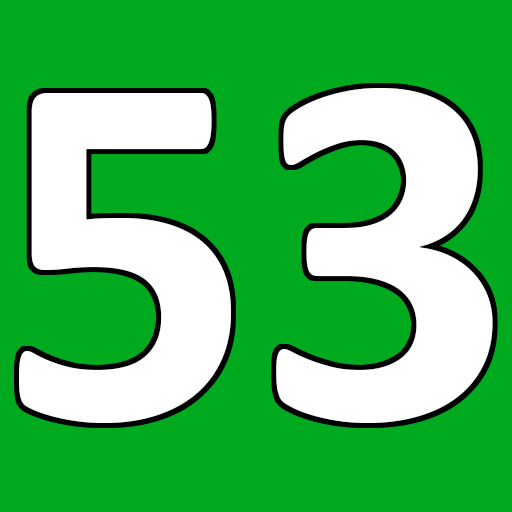
<style>
.page{position:relative;width:512px;height:512px;background:#00aa1e}
.page>*{position:absolute;margin:0}
.t1{font:511.5px "Calibri-Bold";color:#ffffff}
</style>
<div class="page">
<p class="t1" style="left:19px;top:88px;width:474px;height:335px">53</p>
</div>
